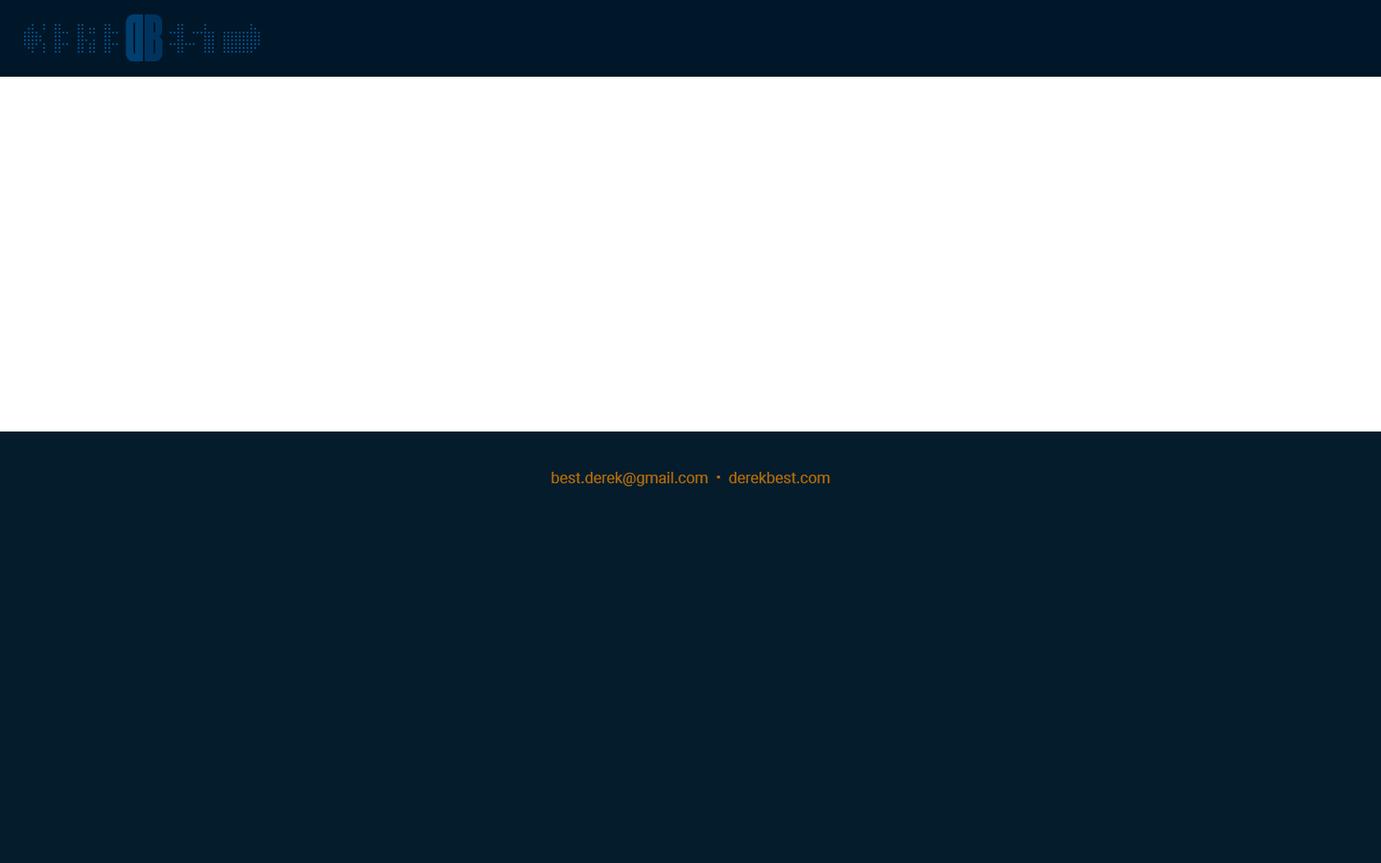
<style>
.page{position:relative;width:1381px;height:863px;background:#051c2d}
.page>*{position:absolute;margin:0}
.t1{font:15.3px "Roboto-Regular";color:#b26f00}
</style>
<div class="page">
<p class="t1" style="left:552px;top:472px;width:278px;height:14px">best.derek@gmail.com  •  derekbest.com</p>
</div>
